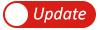
<style>
.page{position:relative;width:100px;height:30px;background:#d91e18}
.page>*{position:absolute;margin:0}
.t1{font:18px "Calibri-Italic";color:#ffffff}
</style>
<div class="page">
<p class="t1" style="left:34px;top:7px;width:52px;height:16px">Update</p>
</div>
